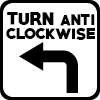
<style>
.page{position:relative;width:100px;height:100px;background:#ffffff}
.page>*{position:absolute;margin:0}
.t1{font:16px/14px "PRIMETIME-Regular";letter-spacing:-0.02em;color:#000000}
.t2{font:19.2px/14px "PRIMETIME-Regular";letter-spacing:-0.02em;color:#000000}
.t3{font:16.1px/14px "PRIMETIME-Regular";letter-spacing:-0.02em;color:#000000}
</style>
<div class="page">
<p class="t1" style="left:6px;top:12px;width:89px;height:28px;text-align:center"><span class="t2">turn </span><span class="t3">anti<br></span>clockwise</p>
</div>
